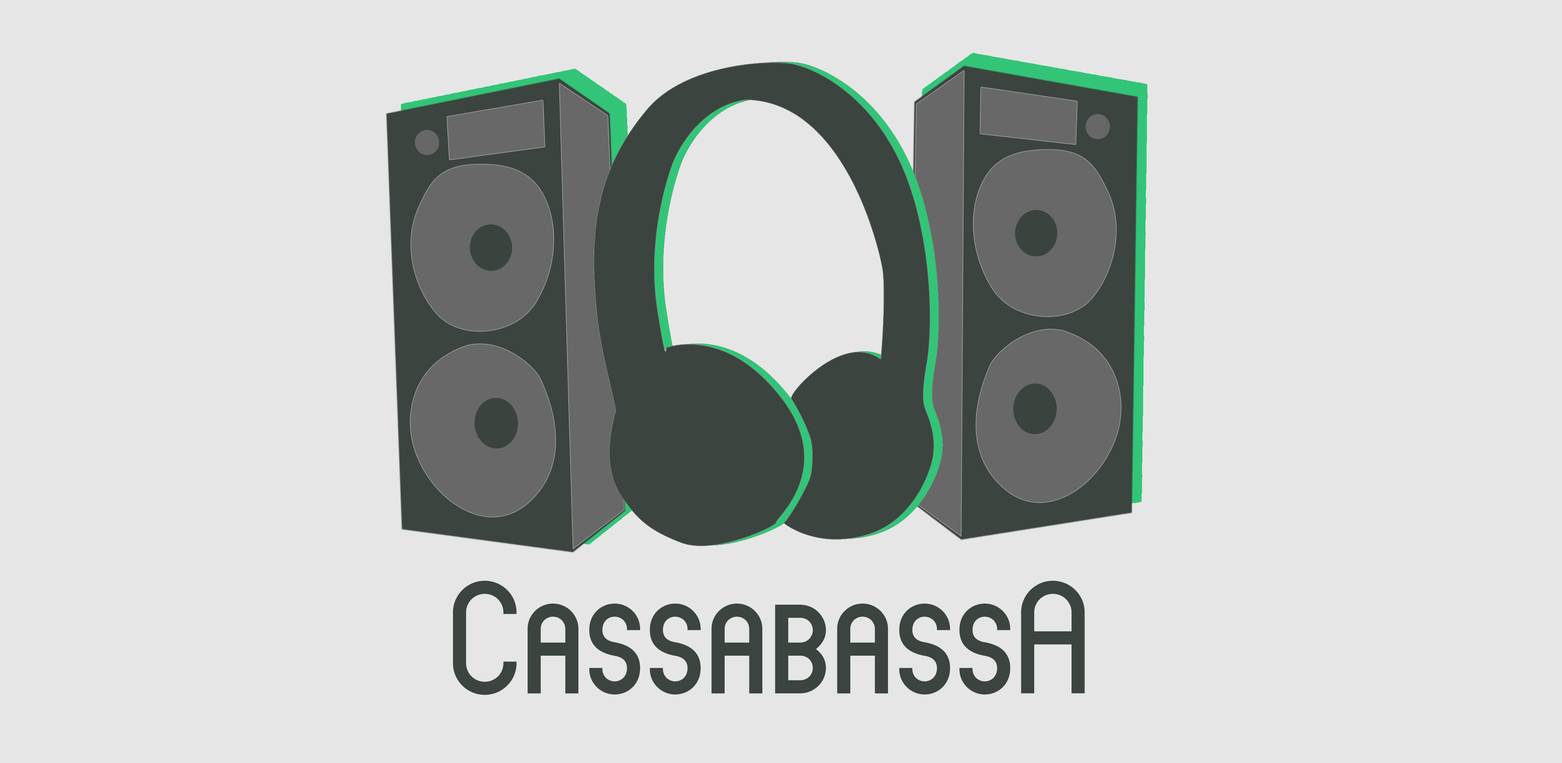
<style>
.page{position:relative;width:1562px;height:763px;background:#e6e6e6}
.page>*{position:absolute;margin:0}
.t1{font:158.7px "Circula-Medium";color:#3b443f}
</style>
<div class="page">
<p class="t1" style="left:453px;top:581px;width:632px;height:114px">CassabassA</p>
</div>
